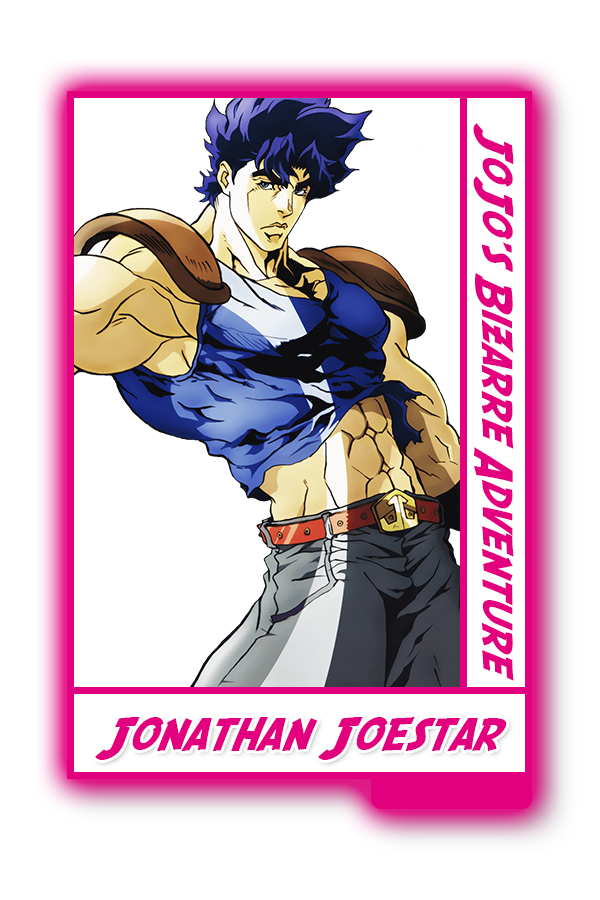
<style>
.page{position:relative;width:600px;height:900px;background:#ffffff}
.page>*{position:absolute;margin:0}
.t1{font:42.4px "SFFedora";color:#e3007e}
.t2{font:45.6px "SFFedora";color:#e3007e}
</style>
<div class="page">
<p class="t1" style="left:473px;top:123px;width:41px;height:558px;rotate:90deg">JoJo's Bizarre Adventure</p>
<p class="t2" style="left:95px;top:717px;width:412px;height:43px">Jonathan Joestar</p>
</div>
